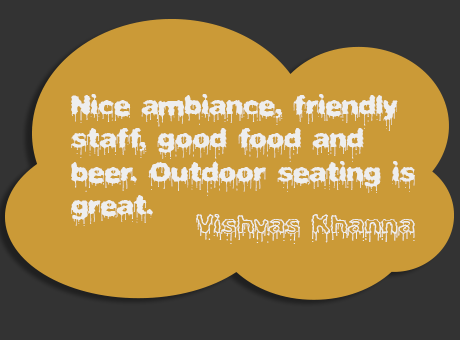
<style>
.page{position:relative;width:460px;height:340px;background:#cb9a37}
.page>*{position:absolute;margin:0}
.t1{font:28px "PlasmaDrip(BRK)";color:#eeeeee}
.t2{font:28px "PlasmaDrip[Empty](BRK)";color:#eeeeee}
</style>
<div class="page">
<p class="t1" style="left:71px;top:94px;width:344px;height:132px">Nice ambiance, friendly staff, good food and beer. Outdoor seating is great.</p>
<p class="t2" style="left:196px;top:214px;width:219px;height:30px">Vishvas Khanna</p>
</div>
